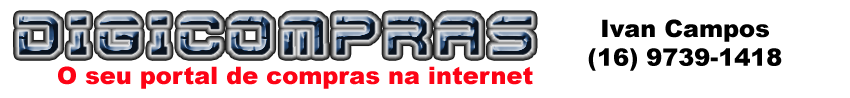
<style>
.page{position:relative;width:850px;height:98px;background:#ffffff}
.page>*{position:absolute;margin:0}
.t1{font:56.8px "Futura";scale:1.07 1}
.t2{font:24px "Arial-Black";color:#000000}
.t3{font:24px "Arial-Black";color:#fd0315}
</style>
<div class="page">
<p class="t1" style="left:19px;top:16px;width:513px;height:39px">Digicompras</p>
<p class="t2" style="left:588px;top:19px;width:194px;height:52px;text-align:center">Ivan Campos<br>(16) 9739-1418</p>
<p class="t3" style="left:58px;top:66px;width:475px;height:23px">O seu portal de compras na internet</p>
</div>
